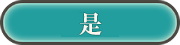
<style>
.page{position:relative;width:180px;height:45px}
.page>*{position:absolute;margin:0}
.t1{font:24px "RyuminPr6N-ExBold";color:#fbf5ee}
</style>
<div class="page">
<p class="t1" style="left:79px;top:12px;width:23px;height:23px">是</p>
</div>
